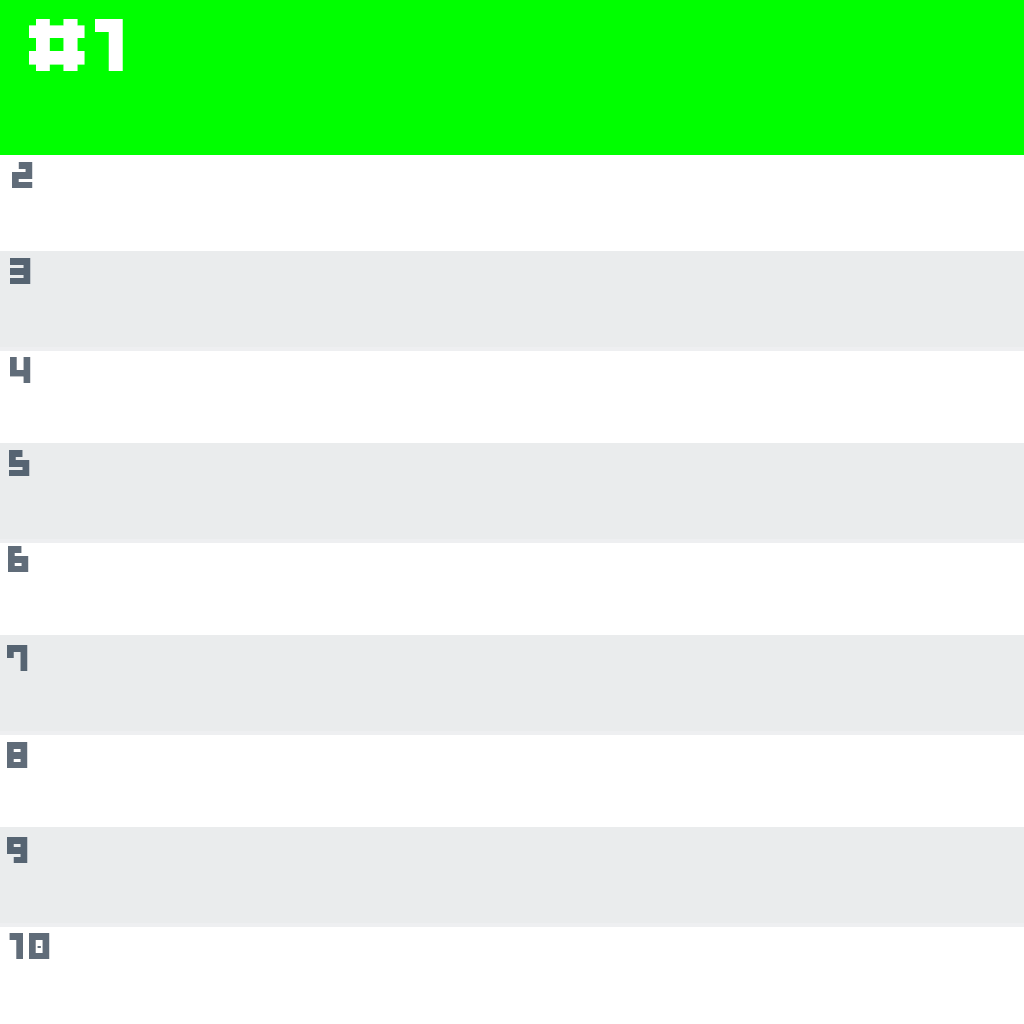
<style>
.page{position:relative;width:1024px;height:1024px;background:#ffffff}
.page>*{position:absolute;margin:0}
.t1{font:15.7px "GAUfontcubeB";color:#ffffff}
.t2{font:7.7px "GAUfontcubeB";color:#606c79}
.t3{font:7.7px "GAUfontcubeB";color:#566472}
</style>
<div class="page">
<p class="t1" style="left:29px;top:19px;width:94px;height:52px">#1</p>
<p class="t2" style="left:12px;top:162px;width:21px;height:26px">2</p>
<p class="t3" style="left:10px;top:258px;width:21px;height:26px">3</p>
<p class="t2" style="left:10px;top:357px;width:21px;height:26px">4</p>
<p class="t3" style="left:9px;top:450px;width:21px;height:26px">5</p>
<p class="t2" style="left:8px;top:546px;width:21px;height:26px">6</p>
<p class="t3" style="left:7px;top:645px;width:21px;height:26px">7</p>
<p class="t2" style="left:7px;top:742px;width:21px;height:26px">8</p>
<p class="t3" style="left:7px;top:837px;width:21px;height:26px">9</p>
<p class="t2" style="left:9px;top:933px;width:41px;height:26px">10</p>
</div>
